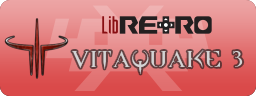
<style>
.page{position:relative;width:256px;height:96px}
.page>*{position:absolute;margin:0}
.t1{font:20px "QUAKE2";letter-spacing:0.075em;color:#d3d3d3}
</style>
<div class="page">
<p class="t1" style="left:72px;top:50px;width:171px;height:24px">VITAQUAKE 3</p>
</div>
